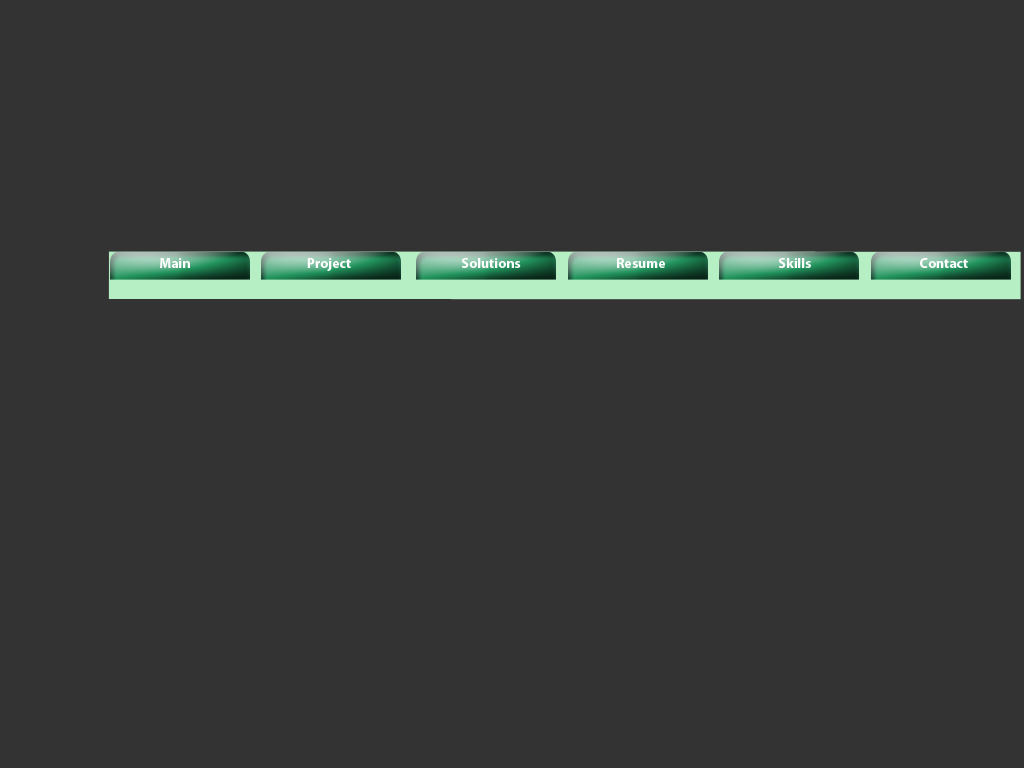
<style>
.page{position:relative;width:1024px;height:768px;background:#333333}
.page>*{position:absolute;margin:0}
.t1{font:14px "MyriadPro-Bold";color:#ffffff}
</style>
<div class="page">
<p class="t1" style="left:160px;top:258px;width:30px;height:10px">Main</p>
<p class="t1" style="left:307px;top:258px;width:44px;height:13px">Project</p>
<p class="t1" style="left:462px;top:258px;width:59px;height:10px">Solutions</p>
<p class="t1" style="left:617px;top:258px;width:48px;height:10px">Resume</p>
<p class="t1" style="left:779px;top:258px;width:32px;height:10px">Skills</p>
<p class="t1" style="left:920px;top:258px;width:48px;height:10px">Contact</p>
</div>
